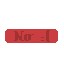
<style>
.page{position:relative;width:64px;height:64px;background:#ffffff}
.page>*{position:absolute;margin:0}
.t1{font:14px "Superscript";color:#a23232}
</style>
<div class="page">
<p class="t1" style="left:14px;top:30px;width:36px;height:12px">No :(</p>
</div>
